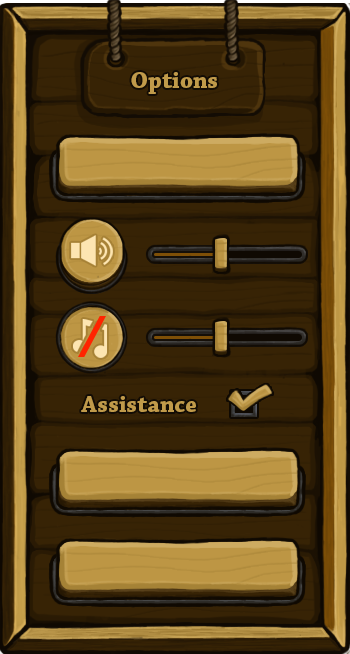
<style>
.page{position:relative;width:350px;height:654px;background:#372305}
.page>*{position:absolute;margin:0}
.t1{font:24px "ChaparralPro-Bold";color:#c09a4a}
</style>
<div class="page">
<p class="t1" style="left:131px;top:72px;width:86px;height:22px">Options</p>
<p class="t1" style="left:81px;top:396px;width:115px;height:16px">Assistance</p>
</div>
